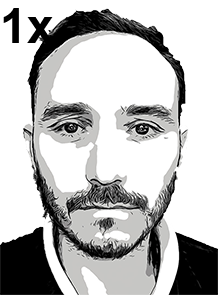
<style>
.page{position:relative;width:218px;height:295px;background:#ffffff}
.page>*{position:absolute;margin:0}
.t1{font:48px "Arial-BoldMT";color:#000000}
</style>
<div class="page">
<p class="t1" style="left:3px;top:8px;width:51px;height:35px">1x</p>
</div>
